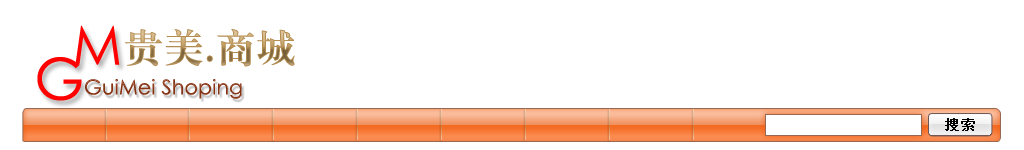
<style>
.page{position:relative;width:1024px;height:150px;background:#ffffff}
.page>*{position:absolute;margin:0}
.t1{font:39.9px "ç»å¸ç²å®ç®-regular";letter-spacing:0.01em}
.t2{font:20.4px "CenturyGothic";letter-spacing:0.01em;color:#873313}
.t3{font:14px "SimSun";letter-spacing:0.1em;color:#000000;font-weight:bold}
</style>
<div class="page">
<p class="t1" style="left:125px;top:29px;width:170px;height:38px">贵美.商城</p>
<p class="t2" style="left:85px;top:79px;width:157px;height:20px">GuiMei Shoping</p>
<p class="t3" style="left:945px;top:118px;width:30px;height:13px">搜索</p>
</div>
